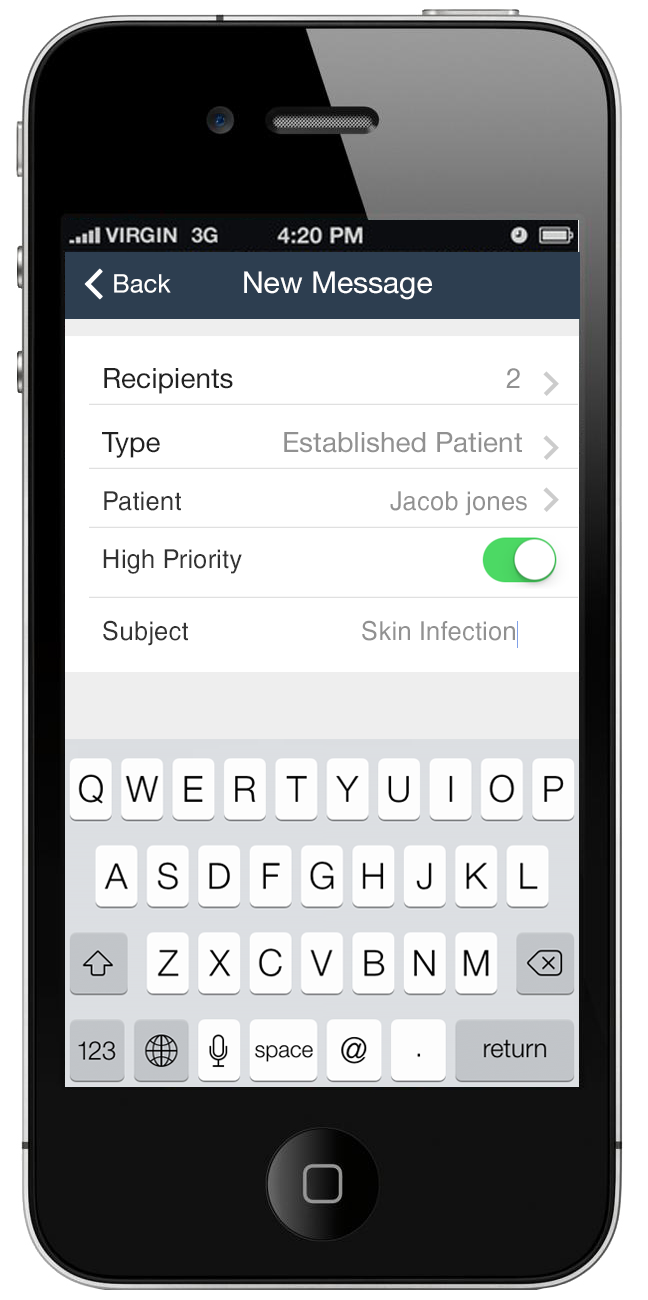
<style>
.page{position:relative;width:648px;height:1300px;background:#ffffff}
.page>*{position:absolute;margin:0}
.t1{font:25.5px "HelveticaNeue";color:#ffffff}
.t2{font:30px "HelveticaNeue";color:#ffffff}
.t3{font:28px "HelveticaNeue";color:#212121}
.t4{font:28px "HelveticaNeue";color:#919191}
.t5{font:26px "HelveticaCyr-Upright";color:#919191}
.t6{font:26px "HelveticaCyr-Upright";color:#333333}
</style>
<div class="page">
<p class="t1" style="left:114px;top:274px;width:57px;height:19px">Back</p>
<p class="t2" style="left:244px;top:271px;width:188px;height:29px">New Message</p>
<p class="t3" style="left:104px;top:368px;width:416px;height:26px">Recipients                    <span class="t4">2</span></p>
<p class="t4" style="left:102px;top:432px;width:420px;height:26px"><span class="t3">Type    </span>Established Patient</p>
<p class="t5" style="left:104px;top:491px;width:423px;height:25px"><span class="t6">Patient      </span>Jacob jones</p>
<p class="t6" style="left:103px;top:549px;width:139px;height:25px">High Priority</p>
<p class="t5" style="left:103px;top:620px;width:412px;height:26px"><span class="t6">Subject      </span>Skin Infection</p>
</div>
